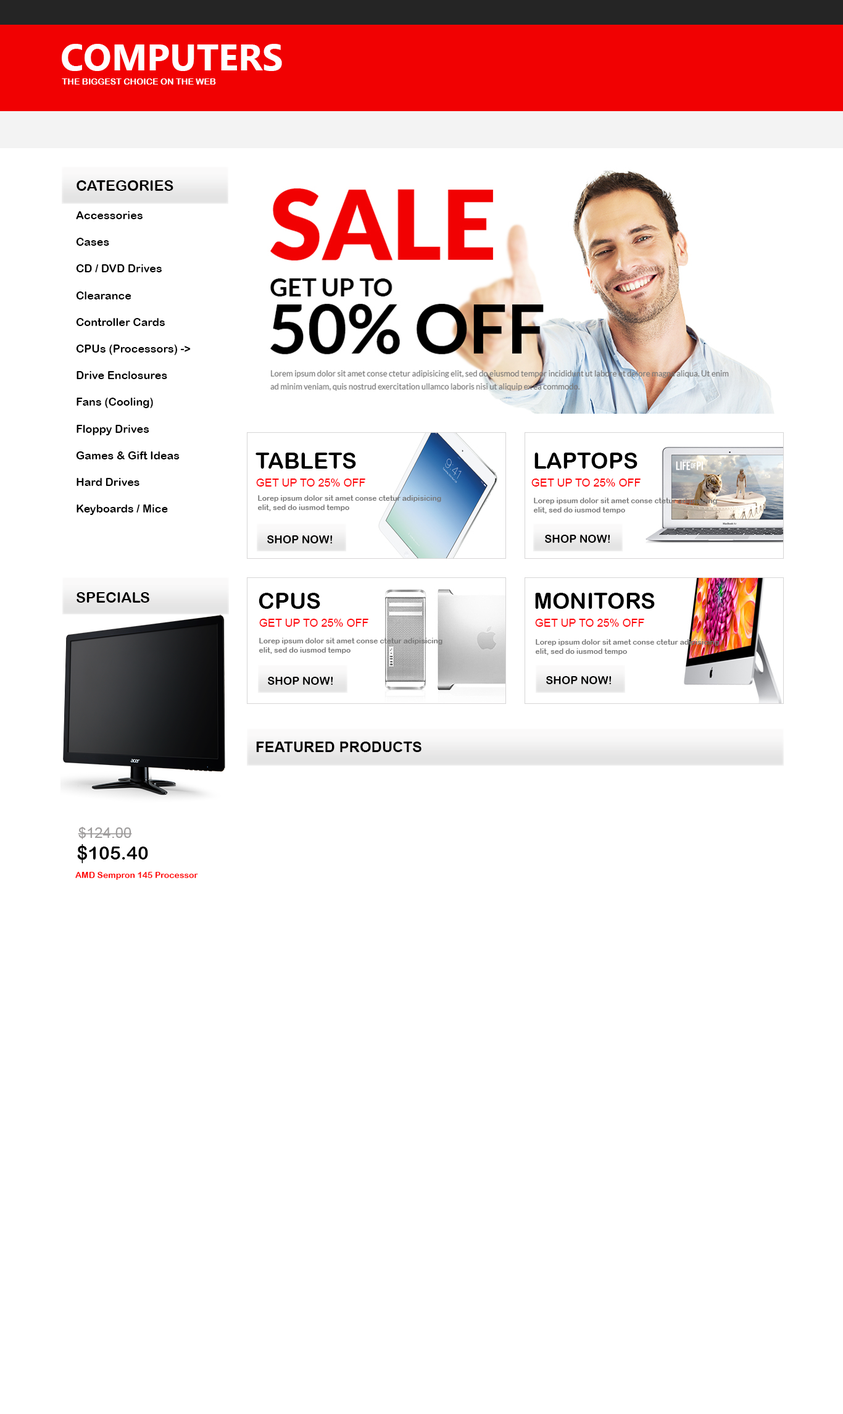
<style>
.page{position:relative;width:843px;height:1414px;background:#ffffff}
.page>*{position:absolute;margin:0}
.t1{font:37px "Ebrima-Bold";color:#fefefe}
.t2{font:8.6px "ArialRoundedMTBold";color:#fefefe}
.t3{font:14.8px "ArialRoundedMTBold";color:#000000}
.t4{font:11.1px "ArialRoundedMTBold";color:#000000}
.t5{font:22.2px "ArialRoundedMTBold";color:#000000}
.t6{font:11.1px "ArialMT";color:#ff0309}
.t7{font:7.4px "ArialRoundedMTBold";color:#777777}
.t8{font:14.8px "Arial-BoldMT";color:#000000}
.t9{font:14.8px "ArialMT";color:#9e9c9c}
.t10{font:18.5px "ArialRoundedMTBold";color:#000000}
.t11{font:8.6px "ArialRoundedMTBold";color:#ff0000}
</style>
<div class="page">
<p class="t1" style="left:62px;top:44px;width:220px;height:27px">COMPUTERS</p>
<p class="t2" style="left:62px;top:78px;width:154px;height:7px">THE BIGGEST CHOICE ON THE WEB</p>
<p class="t3" style="left:77px;top:180px;width:96px;height:11px">CATEGORIES</p>
<p class="t4" style="left:76px;top:211px;width:115px;height:304px">Accessories<br><br>Cases<br><br>CD / DVD Drives<br><br>Clearance<br><br>Controller Cards<br><br>CPUs (Processors) -&gt;<br><br>Drive Enclosures<br><br>Fans (Cooling)<br><br>Floppy Drives<br><br>Games &amp; Gift Ideas<br><br>Hard Drives<br><br>Keyboards / Mice</p>
<p class="t5" style="left:256px;top:453px;width:100px;height:16px">TABLETS</p>
<p class="t5" style="left:535px;top:453px;width:103px;height:16px">LAPTOPS</p>
<p class="t6" style="left:256px;top:478px;width:110px;height:9px">GET UP TO 25% OFF</p>
<p class="t6" style="left:532px;top:478px;width:109px;height:9px">GET UP TO 25% OFF</p>
<p class="t7" style="left:258px;top:495px;width:183px;height:16px">Lorep ipsum dolor sit amet conse ctetur adipisicing<br>elit, sed do iusmod tempo</p>
<p class="t7" style="left:534px;top:498px;width:183px;height:16px">Lorep ipsum dolor sit amet conse ctetur adipisicing<br>elit, sed do iusmod tempo</p>
<p class="t4" style="left:267px;top:535px;width:66px;height:8px">SHOP NOW!</p>
<p class="t4" style="left:545px;top:535px;width:66px;height:8px">SHOP NOW!</p>
<p class="t3" style="left:77px;top:592px;width:72px;height:11px">SPECIALS</p>
<p class="t5" style="left:259px;top:593px;width:61px;height:16px">CPUS</p>
<p class="t5" style="left:535px;top:593px;width:120px;height:16px">MONITORS</p>
<p class="t6" style="left:259px;top:619px;width:110px;height:8px">GET UP TO 25% OFF</p>
<p class="t6" style="left:535px;top:619px;width:110px;height:8px">GET UP TO 25% OFF</p>
<p class="t7" style="left:259px;top:638px;width:184px;height:16px">Lorep ipsum dolor sit amet conse ctetur adipisicing<br>elit, sed do iusmod tempo</p>
<p class="t7" style="left:536px;top:639px;width:183px;height:16px">Lorep ipsum dolor sit amet conse ctetur adipisicing<br>elit, sed do iusmod tempo</p>
<p class="t4" style="left:268px;top:677px;width:65px;height:8px">SHOP NOW!</p>
<p class="t4" style="left:546px;top:676px;width:66px;height:8px">SHOP NOW!</p>
<p class="t8" style="left:256px;top:742px;width:166px;height:10px">FEATURED PRODUCTS</p>
<p class="t9" style="left:78px;top:827px;width:54px;height:12px">$124.00</p>
<p class="t10" style="left:77px;top:844px;width:71px;height:19px">$105.40</p>
<p class="t11" style="left:75px;top:872px;width:123px;height:8px">AMD Sempron 145 Processor</p>
</div>
